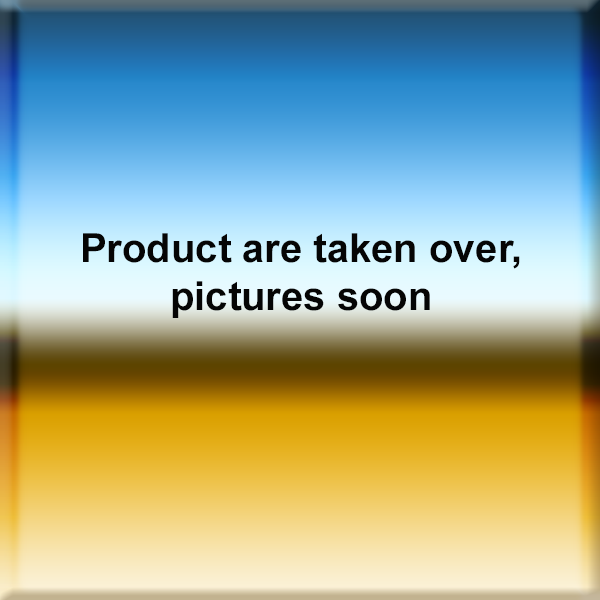
<style>
.page{position:relative;width:600px;height:600px}
.page>*{position:absolute;margin:0}
.t1{font:40px "Arial-BoldMT";color:#050505}
</style>
<div class="page">
<p class="t1" style="left:83px;top:233px;width:437px;height:85px;text-align:center">Product are taken over, pictures soon</p>
</div>
